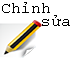
<style>
.page{position:relative;width:71px;height:58px;background:#ffffff}
.page>*{position:absolute;margin:0}
.t1{font:12px/13.3px "CourierNewPSMT";color:#000000}
</style>
<div class="page">
<p class="t1" style="left:2px;top:2px;width:68px;height:24px">Chỉnh<br>    sửa</p>
</div>
